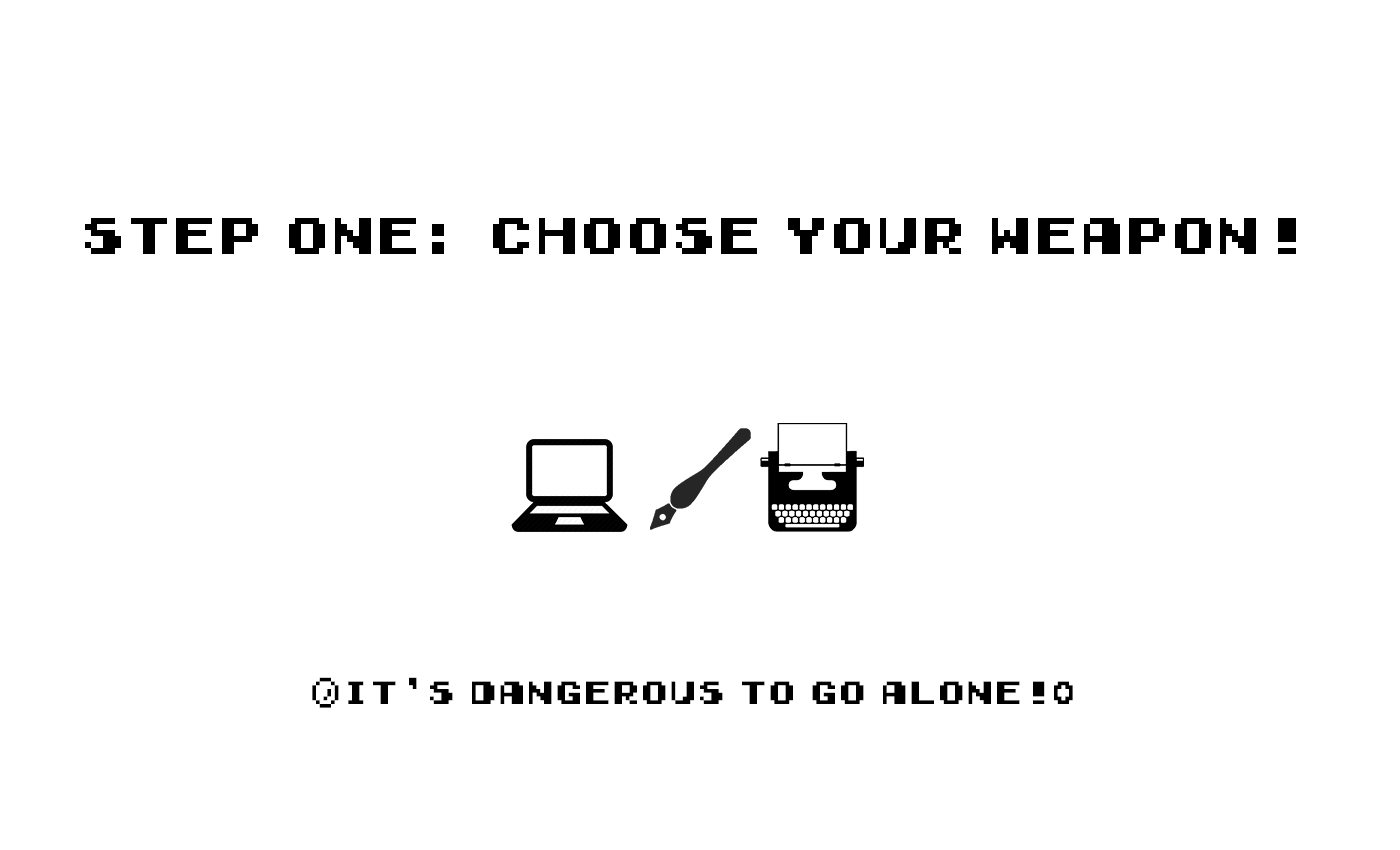
<style>
.page{position:relative;width:1400px;height:850px;background:#ffffff}
.page>*{position:absolute;margin:0}
.t1{font:48px "Early-GameBoy";letter-spacing:-0.05em;color:#000000}
.t2{font:30px "Early-GameBoy";letter-spacing:-0.05em;color:#000000}
</style>
<div class="page">
<p class="t1" style="left:85px;top:218px;width:1211px;height:36px">Step One: Choose Your Weapon!</p>
<p class="t2" style="left:312px;top:677px;width:761px;height:31px">(it’s Dangerous to go alone!)</p>
</div>
